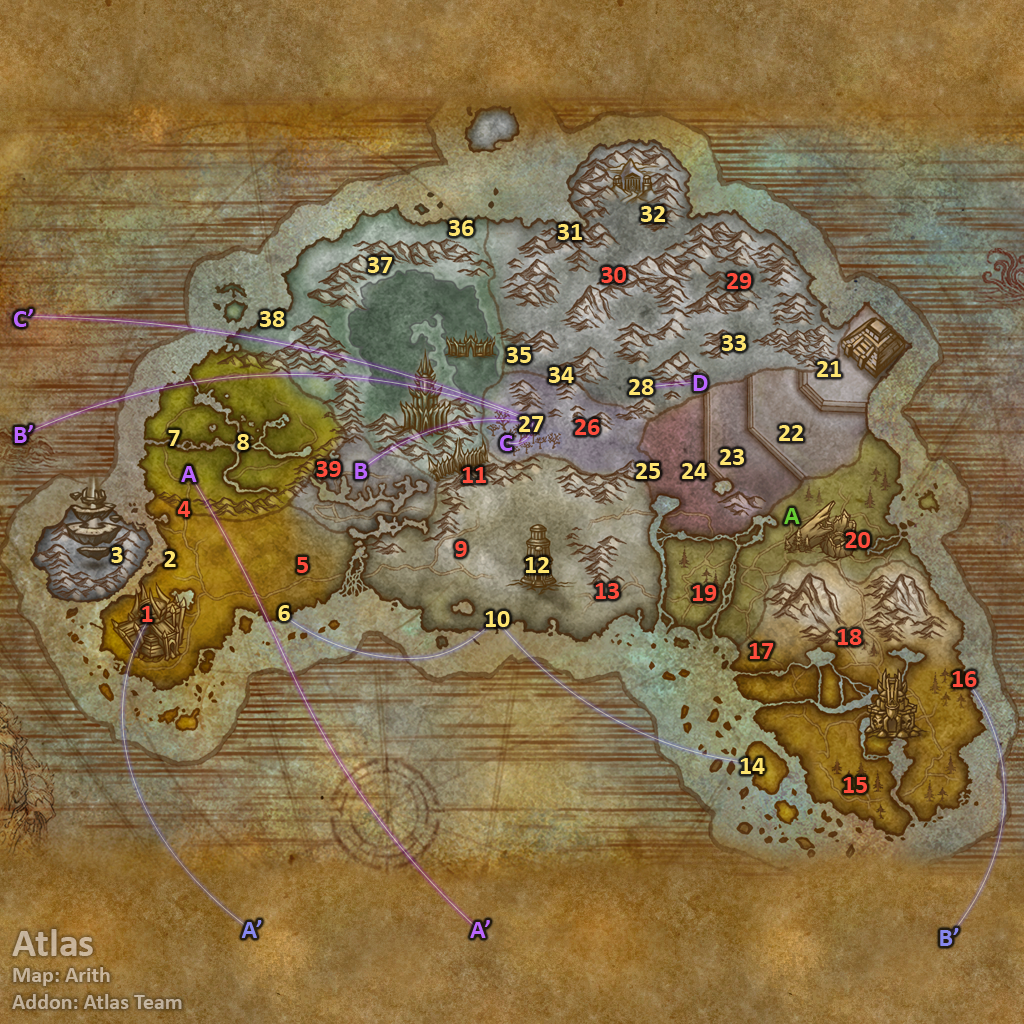
<style>
.page{position:relative;width:1024px;height:1024px}
.page>*{position:absolute;margin:0}
.t1{font:26px "Calibri-Bold";color:#fee570}
.t2{font:26px "Calibri-Bold";color:#ff4c3c}
.t3{font:26px "Calibri-Bold";color:#bb66ff}
.t4{font:26px "Calibri-Bold";color:#66cc33}
.t5{font:22px "Calibri-Bold";color:#c4b39b}
.t6{font:40px "Calibri-Bold";color:#c4b39b}
.t7{font:26px "Calibri-Bold";color:#8788ee}
</style>
<div class="page">
<p class="t1" style="left:641px;top:206px;width:25px;height:16px">32</p>
<p class="t1" style="left:449px;top:220px;width:25px;height:16px">36</p>
<p class="t1" style="left:558px;top:224px;width:24px;height:16px">31</p>
<p class="t1" style="left:368px;top:257px;width:25px;height:16px">37</p>
<p class="t2" style="left:601px;top:267px;width:25px;height:16px">30</p>
<p class="t2" style="left:727px;top:273px;width:25px;height:16px">29</p>
<p class="t3" style="left:14px;top:309px;width:19px;height:18px">C’</p>
<p class="t1" style="left:260px;top:311px;width:25px;height:16px">38</p>
<p class="t1" style="left:722px;top:335px;width:24px;height:16px">33</p>
<p class="t1" style="left:507px;top:347px;width:24px;height:16px">35</p>
<p class="t1" style="left:817px;top:361px;width:24px;height:16px">21</p>
<p class="t1" style="left:549px;top:367px;width:25px;height:16px">34</p>
<p class="t3" style="left:693px;top:375px;width:15px;height:16px">D</p>
<p class="t1" style="left:629px;top:379px;width:25px;height:16px">28</p>
<p class="t3" style="left:14px;top:425px;width:19px;height:18px">B’</p>
<p class="t1" style="left:519px;top:416px;width:25px;height:16px">27</p>
<p class="t2" style="left:575px;top:419px;width:25px;height:16px">26</p>
<p class="t1" style="left:779px;top:425px;width:25px;height:16px">22</p>
<p class="t1" style="left:168px;top:430px;width:12px;height:16px">7</p>
<p class="t1" style="left:237px;top:434px;width:12px;height:16px">8</p>
<p class="t3" style="left:500px;top:435px;width:13px;height:16px">C</p>
<p class="t1" style="left:720px;top:449px;width:24px;height:16px">23</p>
<p class="t2" style="left:316px;top:461px;width:25px;height:16px">39</p>
<p class="t3" style="left:181px;top:466px;width:16px;height:16px">A</p>
<p class="t3" style="left:355px;top:463px;width:13px;height:16px">B</p>
<p class="t2" style="left:462px;top:467px;width:24px;height:16px">11</p>
<p class="t1" style="left:636px;top:463px;width:24px;height:16px">25</p>
<p class="t1" style="left:682px;top:463px;width:25px;height:16px">24</p>
<p class="t2" style="left:177px;top:501px;width:14px;height:16px">4</p>
<p class="t4" style="left:784px;top:508px;width:16px;height:16px">A</p>
<p class="t2" style="left:845px;top:532px;width:25px;height:16px">20</p>
<p class="t2" style="left:455px;top:541px;width:12px;height:16px">9</p>
<p class="t1" style="left:111px;top:547px;width:12px;height:16px">3</p>
<p class="t1" style="left:164px;top:551px;width:12px;height:16px">2</p>
<p class="t2" style="left:297px;top:557px;width:11px;height:16px">5</p>
<p class="t1" style="left:525px;top:557px;width:25px;height:16px">12</p>
<p class="t2" style="left:595px;top:583px;width:24px;height:16px">13</p>
<p class="t2" style="left:692px;top:585px;width:25px;height:16px">19</p>
<p class="t2" style="left:142px;top:606px;width:11px;height:16px">1</p>
<p class="t1" style="left:278px;top:605px;width:12px;height:16px">6</p>
<p class="t1" style="left:485px;top:611px;width:25px;height:16px">10</p>
<p class="t2" style="left:837px;top:629px;width:25px;height:16px">18</p>
<p class="t2" style="left:749px;top:643px;width:25px;height:16px">17</p>
<p class="t2" style="left:952px;top:671px;width:25px;height:16px">16</p>
<p class="t1" style="left:740px;top:758px;width:25px;height:16px">14</p>
<p class="t2" style="left:843px;top:777px;width:24px;height:16px">15</p>
<p class="t5" style="left:12px;top:929px;width:170px;height:80px"><span class="t6">Atlas<br></span>Map: Arith<br>Addon: Atlas Team</p>
<p class="t7" style="left:241px;top:920px;width:21px;height:18px">A’</p>
<p class="t3" style="left:470px;top:920px;width:20px;height:18px">A’</p>
<p class="t7" style="left:940px;top:928px;width:19px;height:18px">B’</p>
</div>
